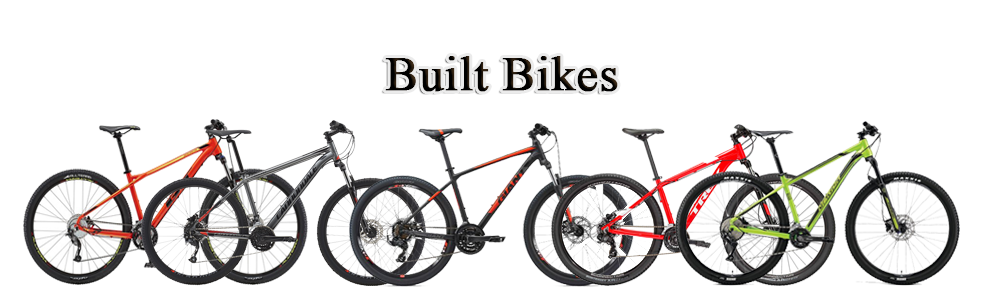
<style>
.page{position:relative;width:1002px;height:308px;background:#ffffff}
.page>*{position:absolute;margin:0}
.t1{font:48px "TimesNewRomanPSMT";letter-spacing:0.005em;color:#000000;font-weight:bold}
</style>
<div class="page">
<p class="t1" style="left:385px;top:56px;width:233px;height:36px">Built Bikes</p>
</div>
